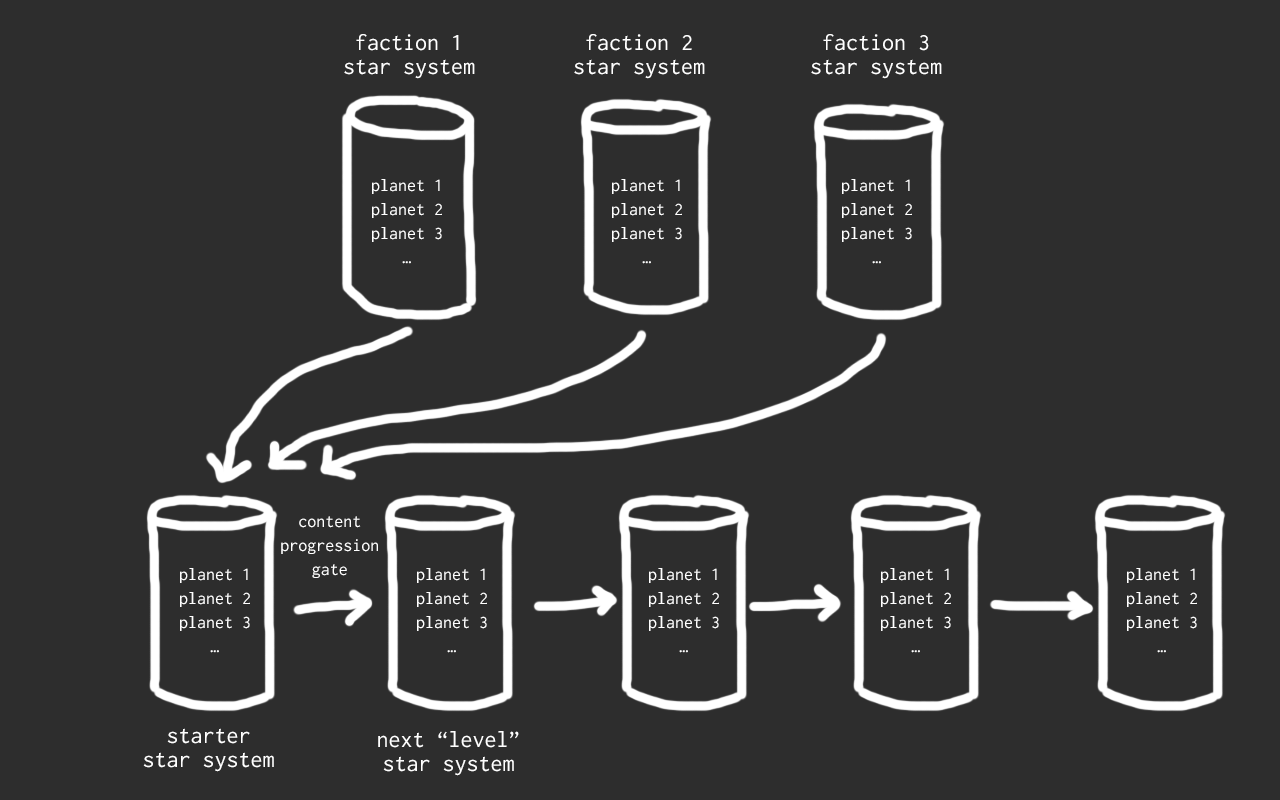
<style>
.page{position:relative;width:1280px;height:800px;background:#2d2d2d}
.page>*{position:absolute;margin:0}
.t1{font:24px/24px "Inconsolata";color:#ffffff}
.t2{font:18px/24px "Inconsolata";color:#ffffff}
</style>
<div class="page">
<p class="t1" style="left:344px;top:34px;width:131px;height:45px;text-align:center">faction 1<br>star system</p>
<p class="t1" style="left:574px;top:34px;width:131px;height:45px;text-align:center">faction 2<br>star system</p>
<p class="t1" style="left:811px;top:34px;width:131px;height:45px;text-align:center">faction 3<br>star system</p>
<p class="t2" style="left:372px;top:179px;width:70px;height:85px;text-align:center">planet 1<br>planet 2<br>planet 3<br>…</p>
<p class="t2" style="left:612px;top:179px;width:70px;height:85px;text-align:center">planet 1<br>planet 2<br>planet 3<br>…</p>
<p class="t2" style="left:842px;top:179px;width:70px;height:85px;text-align:center">planet 1<br>planet 2<br>planet 3<br>…</p>
<p class="t2" style="left:281px;top:516px;width:97px;height:62px;text-align:center">content<br>progression<br>gate</p>
<p class="t2" style="left:180px;top:568px;width:70px;height:85px;text-align:center">planet 1<br>planet 2<br>planet 3<br>…</p>
<p class="t2" style="left:417px;top:568px;width:70px;height:85px;text-align:center">planet 1<br>planet 2<br>planet 3<br>…</p>
<p class="t2" style="left:649px;top:568px;width:70px;height:85px;text-align:center">planet 1<br>planet 2<br>planet 3<br>…</p>
<p class="t2" style="left:881px;top:568px;width:70px;height:85px;text-align:center">planet 1<br>planet 2<br>planet 3<br>…</p>
<p class="t2" style="left:1127px;top:568px;width:70px;height:85px;text-align:center">planet 1<br>planet 2<br>planet 3<br>…</p>
<p class="t1" style="left:143px;top:728px;width:131px;height:44px;text-align:center">starter<br>star system</p>
<p class="t1" style="left:378px;top:731px;width:141px;height:45px;text-align:center">next “level”<br>star system</p>
</div>
